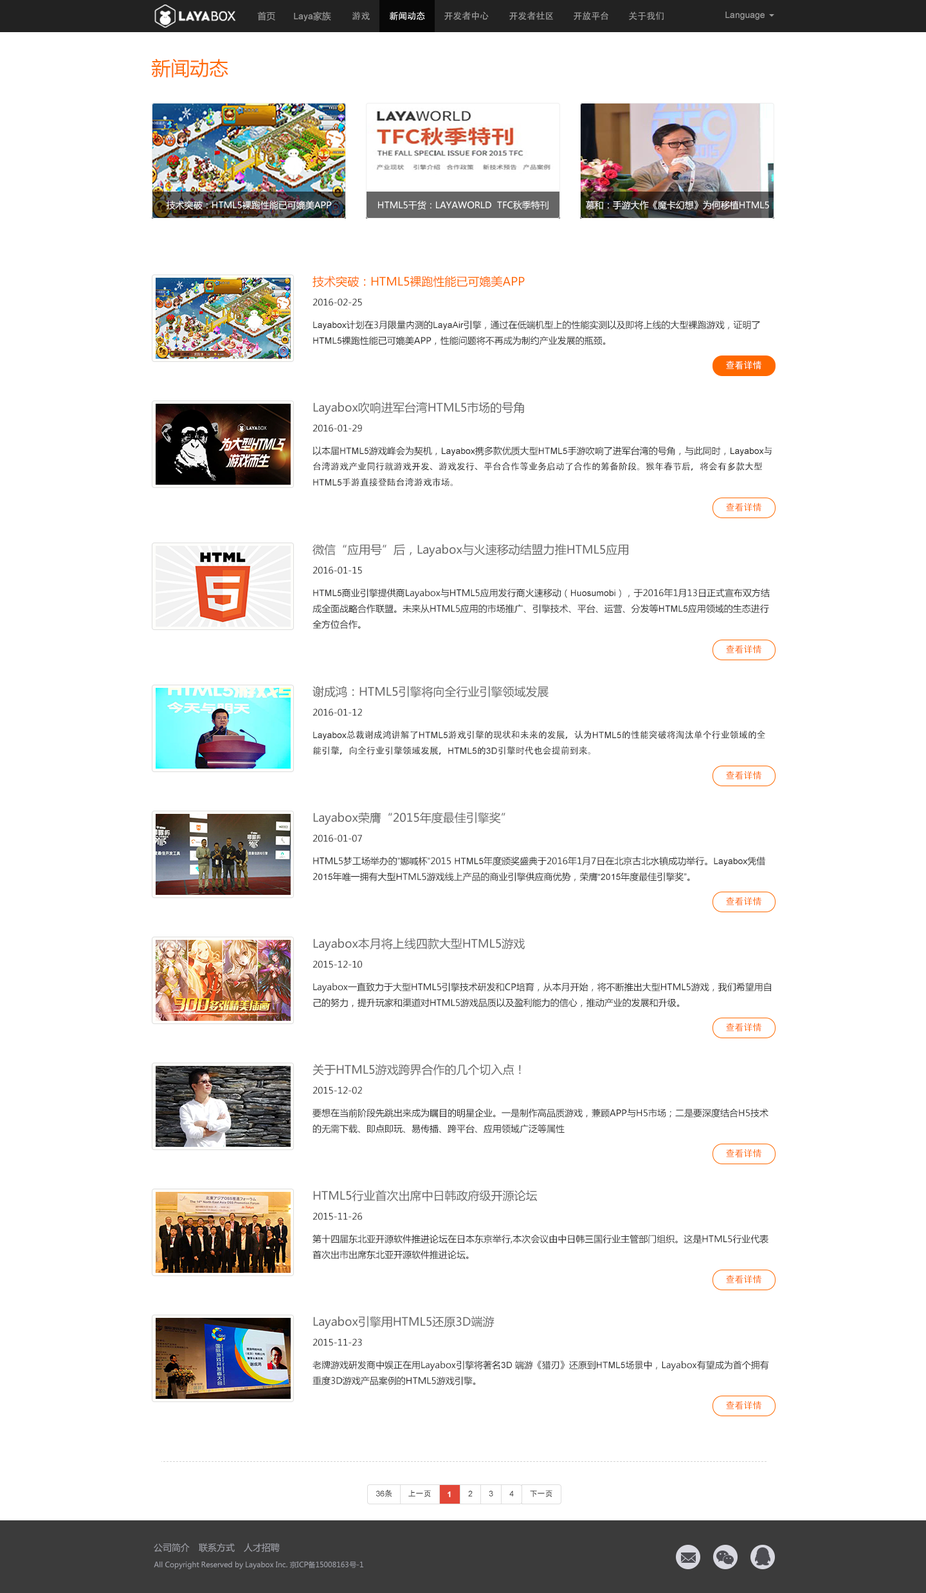
<style>
.page{position:relative;width:926px;height:1593px;background:#ffffff}
.page>*{position:absolute;margin:0}
.t1{font:9px "MicrosoftYaHei";color:#9d9d9d}
.t2{font:9px "ArialMT";color:#9d9d9d}
.t3{font:9px "AdobeHeitiStd-Regular";color:#9d9d9d}
.t4{font:9px "AdobeHeitiStd-Regular";color:#ffffff}
.t5{font:19.3px "MicrosoftYaHei";color:#ff6b08}
.t6{font:9px "MicrosoftYaHei";color:#ffffff}
.t7{font:11.6px "MicrosoftYaHei";color:#ff6900}
.t8{font:9px "MicrosoftYaHei";color:#2a2a2a}
.t9{font:9px "ArialMT";color:#2a2a2a}
.t10{font:11.6px "MicrosoftYaHei";color:#666666}
.t11{font:9px "AdobeHeitiStd-Regular";color:#2a2a2a}
.t12{font:9px "AdobeHeitiStd-Regular";color:#ff6900}
.t13{font:7.7px "ArialMT";color:#2a2a2a}
.t14{font:7.7px "AdobeHeitiStd-Regular";color:#2a2a2a}
.t15{font:7.7px "Arial-BoldMT";color:#ffffff}
.t16{font:9px "MicrosoftYaHei";color:#a1a3ab}
.t17{font:7.2px "MicrosoftYaHei";color:#a1a3ab}
</style>
<div class="page">
<p class="t1" style="left:257px;top:12px;width:18px;height:9px">首页</p>
<p class="t2" style="left:294px;top:12px;width:37px;height:9px">Laya<span class="t1">家族</span></p>
<p class="t3" style="left:352px;top:12px;width:18px;height:8px">游戏</p>
<p class="t4" style="left:390px;top:12px;width:35px;height:9px">新闻动态</p>
<p class="t3" style="left:444px;top:12px;width:45px;height:9px">开发者中心</p>
<p class="t3" style="left:509px;top:12px;width:44px;height:8px">开发者社区</p>
<p class="t3" style="left:573px;top:12px;width:35px;height:9px">开放平台</p>
<p class="t3" style="left:629px;top:12px;width:34px;height:9px">关于我们</p>
<p class="t2" style="left:725px;top:12px;width:39px;height:8px">Language</p>
<p class="t5" style="left:151px;top:59px;width:77px;height:19px">新闻动态</p>
<p class="t6" style="left:166px;top:201px;width:166px;height:9px">技术突破：HTML5裸跑性能已可媲美APP</p>
<p class="t6" style="left:378px;top:201px;width:170px;height:9px">HTML5干货：LAYAWORLD  TFC秋季特刊</p>
<p class="t6" style="left:586px;top:201px;width:183px;height:9px">慕和：手游大作《魔卡幻想》为何移植HTML5</p>
<p class="t7" style="left:312px;top:276px;width:213px;height:11px">技术突破：HTML5裸跑性能已可媲美APP</p>
<p class="t8" style="left:312px;top:298px;width:50px;height:8px">2016-02-25</p>
<p class="t8" style="left:313px;top:320px;width:447px;height:25px"><span class="t9">Layabox</span>计划在3月限量内测的<span class="t9">LayaAir</span>引擎，通过在低端机型上的性能实测以及即将上线的大型裸跑游戏，证明了<br><span class="t9">HTML5</span>裸跑性能已可媲美APP，性能问题将不再成为制约产业发展的瓶颈。</p>
<p class="t4" style="left:726px;top:361px;width:35px;height:9px">查看详情</p>
<p class="t10" style="left:313px;top:402px;width:211px;height:13px">Layabox吹响进军台湾HTML5市场的号角</p>
<p class="t8" style="left:312px;top:424px;width:50px;height:8px">2016-01-29</p>
<p class="t11" style="left:312px;top:446px;width:459px;height:41px"><span class="t8">以本届</span><span class="t9">HTML5</span><span class="t8">游戏峰会为契机，</span><span class="t9">Layabox</span><span class="t8">携多款优质大型</span><span class="t9">HTML5</span><span class="t8">手游吹响了进军台湾的号角，与此同时，</span><span class="t9">Layabox</span>与<br>台湾游戏产业同行就游戏开发、游戏发行、平台合作等业务启动了合作的筹备阶段。猴年春节后，将会有多款大型<br><span class="t9">HTML5</span>手游直接登陆台湾游戏市场。</p>
<p class="t12" style="left:726px;top:503px;width:35px;height:9px">查看详情</p>
<p class="t10" style="left:312px;top:544px;width:316px;height:13px">微信“应用号”后，Layabox与火速移动结盟力推HTML5应用</p>
<p class="t8" style="left:312px;top:566px;width:50px;height:8px">2016-01-15</p>
<p class="t8" style="left:312px;top:588px;width:458px;height:41px"><span class="t9">HTML5</span>商业引擎提供商Layabox与HTML5应用发行商火速移动（<span class="t9">Huosumobi</span>），于2016年1月13日正式宣布双方结<br>成全面战略合作联盟。未来从HTML5应用的市场推广、引擎技术、平台、运营、分发等<span class="t9">HTML5</span>应用领域的生态进行<br>全方位合作。</p>
<p class="t12" style="left:726px;top:645px;width:35px;height:9px">查看详情</p>
<p class="t10" style="left:312px;top:686px;width:236px;height:12px">谢成鸿：HTML5引擎将向全行业引擎领域发展</p>
<p class="t8" style="left:312px;top:708px;width:50px;height:8px">2016-01-12</p>
<p class="t11" style="left:313px;top:730px;width:452px;height:25px"><span class="t9">Layabox</span>总裁谢成鸿讲解了<span class="t9">HTML5</span>游戏引擎的现状和未来的发展，认为<span class="t9">HTML5</span>的性能突破将淘汰单个行业领域的全<br>能引擎，向全行业引擎领域发展，<span class="t9">HTML5</span>的<span class="t9">3D</span>引擎时代也会提前到来。</p>
<p class="t12" style="left:726px;top:771px;width:35px;height:9px">查看详情</p>
<p class="t10" style="left:313px;top:812px;width:192px;height:13px">Layabox荣膺“2015年度最佳引擎奖”</p>
<p class="t8" style="left:312px;top:834px;width:50px;height:8px">2016-01-07</p>
<p class="t8" style="left:312px;top:856px;width:453px;height:25px">HTML5梦工场举办的<span class="t9">”</span>娜喊杯<span class="t9">”</span>2015 <span class="t9">HTML5</span>年度颁奖盛典于2016年1月7日在北京古北水镇成功举行。<span class="t9">Layabox</span>凭借<br>2<span class="t9">015</span>年唯一拥有大型HTML5游戏线上产品的商业引擎供应商优势，荣膺<span class="t9">“2015</span>年度最佳引擎奖<span class="t9">”</span>。</p>
<p class="t12" style="left:726px;top:897px;width:35px;height:9px">查看详情</p>
<p class="t10" style="left:313px;top:938px;width:212px;height:13px">Layabox本月将上线四款大型HTML5游戏</p>
<p class="t8" style="left:312px;top:960px;width:50px;height:8px">2015-12-10</p>
<p class="t8" style="left:313px;top:982px;width:458px;height:25px">Layabox一直致力于大型HTML5引擎技术研发和CP培育，从本月开始，将不断推出大型HTML5游戏，我们希望用自<br>己的努力，提升玩家和渠道对HTML5游戏品质以及盈利能力的信心，推动产业的发展和升级。</p>
<p class="t12" style="left:726px;top:1023px;width:35px;height:9px">查看详情</p>
<p class="t10" style="left:312px;top:1064px;width:209px;height:12px">关于HTML5游戏跨界合作的几个切入点！</p>
<p class="t8" style="left:312px;top:1086px;width:50px;height:8px">2015-12-02</p>
<p class="t8" style="left:312px;top:1108px;width:456px;height:25px">要想在当前阶段先跳出来成为瞩目的明星企业。一是制作高品质游戏，兼顾APP与H5市场；二是要深度结合H5技术<br>的无需下载、即点即玩、易传播、跨平台、应用领域广泛等属性</p>
<p class="t12" style="left:726px;top:1149px;width:35px;height:9px">查看详情</p>
<p class="t10" style="left:313px;top:1190px;width:224px;height:12px">HTML5行业首次出席中日韩政府级开源论坛</p>
<p class="t8" style="left:312px;top:1212px;width:50px;height:8px">2015-11-26</p>
<p class="t8" style="left:312px;top:1234px;width:456px;height:25px">第十四届东北亚开源软件推进论坛在日本东京举行,本次会议由中日韩三国行业主管部门组织。这是HTML5行业代表<br>首次出市出席东北亚开源软件推进论坛。</p>
<p class="t12" style="left:726px;top:1275px;width:35px;height:9px">查看详情</p>
<p class="t10" style="left:313px;top:1316px;width:181px;height:13px">Layabox引擎用HTML5还原3D端游</p>
<p class="t8" style="left:312px;top:1338px;width:50px;height:8px">2015-11-23</p>
<p class="t8" style="left:312px;top:1360px;width:457px;height:25px">老牌游戏研发商中娱正在用Layabox引擎将著名<span class="t9">3D </span>端游《猎刃》还原到<span class="t9">HTML5</span>场景中，Layabox有望成为首个拥有<br>重度3D游戏产品案例的HTML5游戏引擎。</p>
<p class="t12" style="left:726px;top:1401px;width:35px;height:9px">查看详情</p>
<p class="t13" style="left:376px;top:1490px;width:16px;height:7px">36<span class="t14">条</span></p>
<p class="t14" style="left:408px;top:1490px;width:23px;height:7px">上一页</p>
<p class="t15" style="left:447px;top:1491px;width:4px;height:6px">1</p>
<p class="t13" style="left:468px;top:1491px;width:5px;height:6px">2</p>
<p class="t13" style="left:489px;top:1491px;width:4px;height:6px">3</p>
<p class="t13" style="left:509px;top:1491px;width:5px;height:6px">4</p>
<p class="t14" style="left:530px;top:1490px;width:22px;height:7px">下一页</p>
<p class="t16" style="left:154px;top:1543px;width:36px;height:10px">公司简介</p>
<p class="t16" style="left:199px;top:1543px;width:36px;height:10px">联系方式</p>
<p class="t16" style="left:244px;top:1543px;width:36px;height:10px">人才招聘</p>
<p class="t17" style="left:154px;top:1561px;width:209px;height:8px">All Copyright Reserved by Layabox Inc. 京ICP备15008163号-1</p>
</div>
